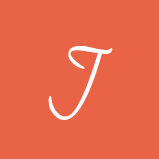
<style>
.page{position:relative;width:159px;height:159px;background:#e96346}
.page>*{position:absolute;margin:0}
.t1{font:80px "BilboSwashCaps-Regular";color:#ffffff;font-weight:bold}
</style>
<div class="page">
<p class="t1" style="left:48px;top:46px;width:65px;height:74px">J</p>
</div>
